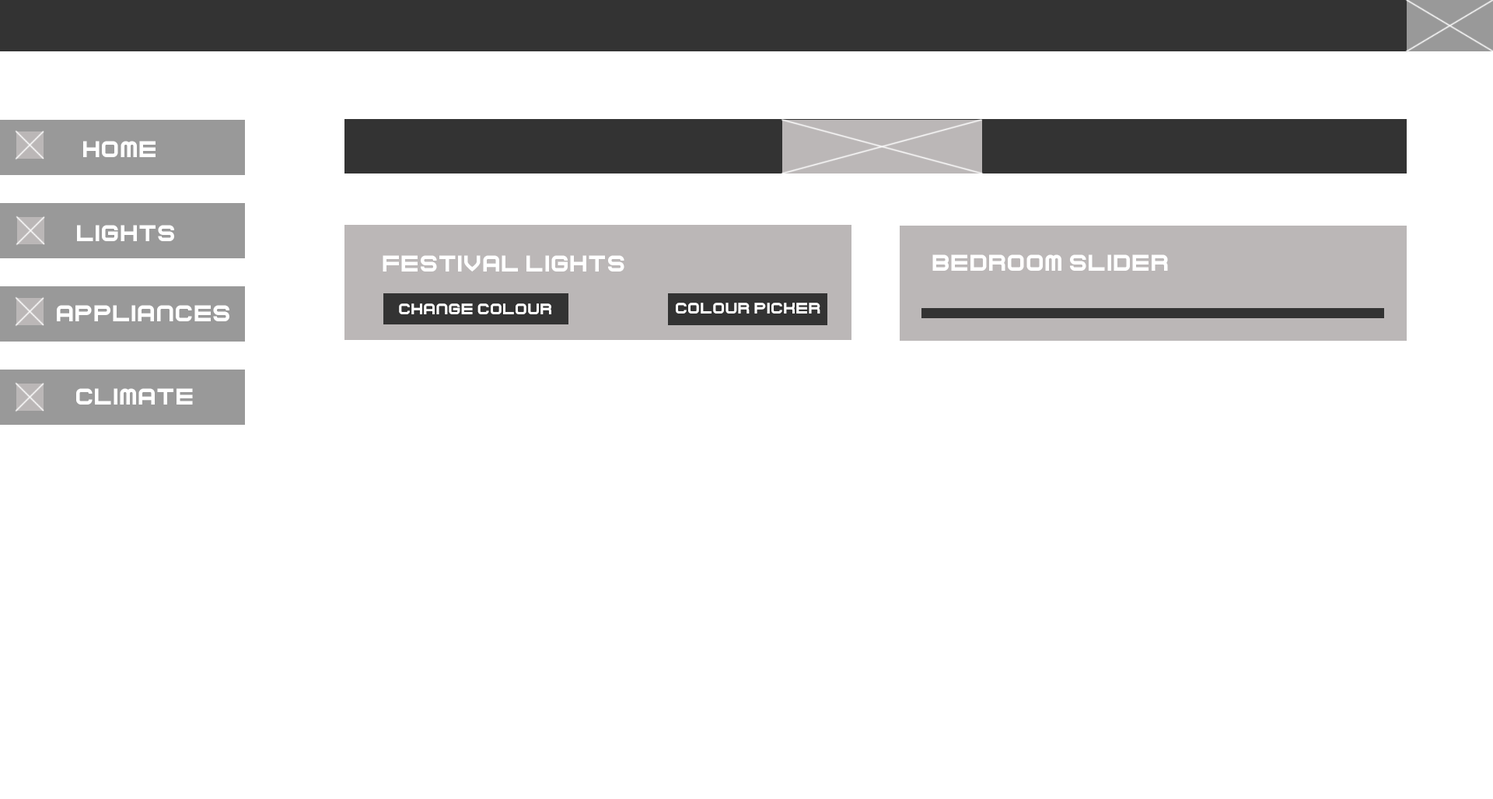
<style>
.page{position:relative;width:1493px;height:799px;background:#ffffff}
.page>*{position:absolute;margin:0}
.t1{font:23.3px "Curvert";color:#ffffff}
.t2{font:15.6px "Curvert";color:#ffffff}
</style>
<div class="page">
<p class="t1" style="left:83px;top:141px;width:73px;height:16px">Home</p>
<p class="t1" style="left:77px;top:225px;width:97px;height:16px">LIGHTS</p>
<p class="t1" style="left:383px;top:255px;width:241px;height:16px">FESTIVAL LIGHTS</p>
<p class="t1" style="left:932px;top:254px;width:236px;height:17px">BEDROOM SLIDER</p>
<p class="t1" style="left:57px;top:305px;width:172px;height:16px">APPLIANCES</p>
<p class="t2" style="left:399px;top:303px;width:152px;height:11px">CHANGE COLOUR</p>
<p class="t2" style="left:676px;top:303px;width:144px;height:10px">COLOUR PICKER</p>
<p class="t1" style="left:76px;top:388px;width:117px;height:16px">CLIMATE</p>
</div>
